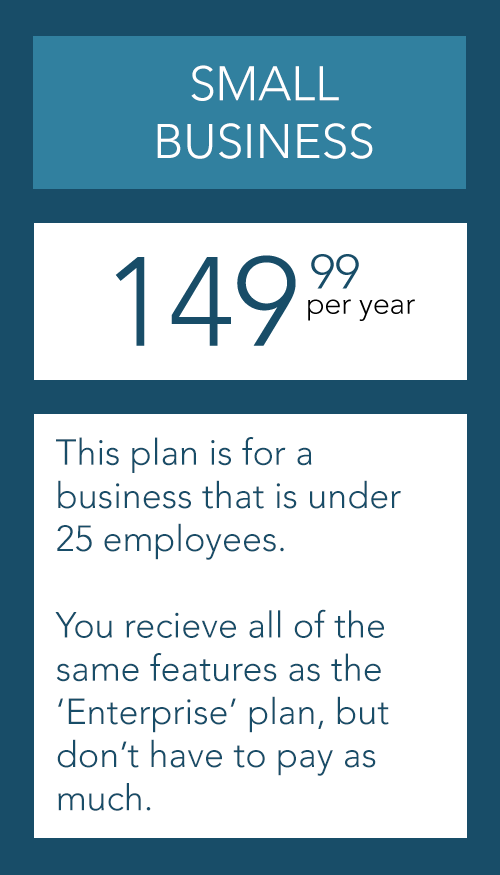
<style>
.page{position:relative;width:500px;height:875px;background:#ffffff}
.page>*{position:absolute;margin:0}
.t1{font:48px "Avenir-Light";color:#ffffff}
.t2{font:36px "Avenir-Light";color:#184d68}
</style>
<div class="page">
<p class="t1" style="left:157px;top:65px;width:216px;height:94px;text-align:center">SMALL<br>BUSINESS</p>
<p class="t2" style="left:55px;top:437px;width:346px;height:374px">This plan is for a business that is under 25 employees. <br><br>You recieve all of the same features as the ‘Enterprise’ plan, but don’t have to pay as much.</p>
</div>
